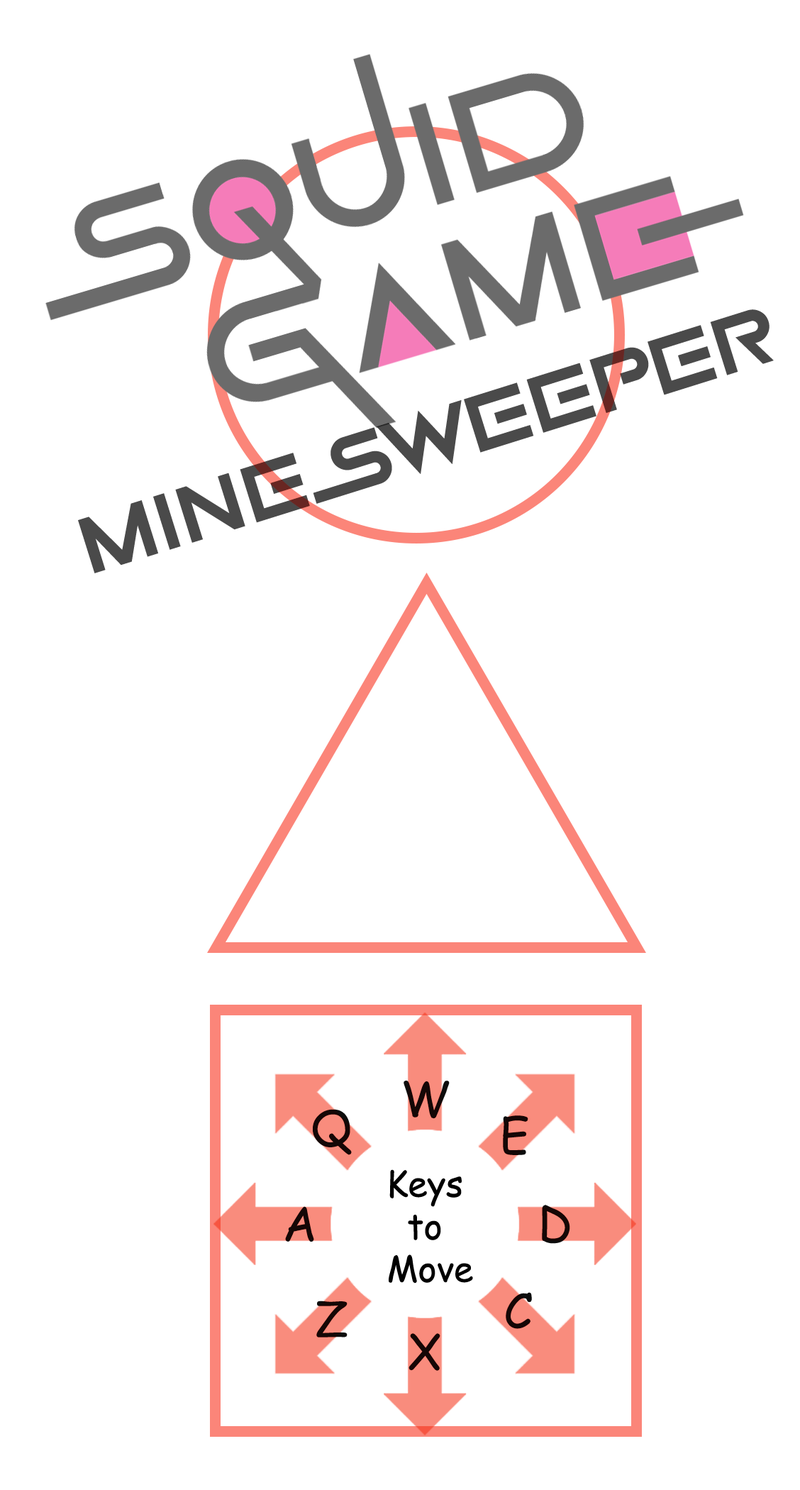
<style>
.page{position:relative;width:800px;height:1490px;background:#ffffff}
.page>*{position:absolute;margin:0}
.t1{font:88.7px "GameOfSquids";color:#4a4a4a}
.t2{font:47.3px "ComicSansMS";color:#000000}
.t3{font:35.5px "ComicSansMS";color:#000000}
</style>
<div class="page">
<p class="t1" style="left:78px;top:309px;width:696px;height:264px;rotate:-17deg">MINESWEEPER</p>
<p class="t2" style="left:404px;top:1081px;width:46px;height:38px;opacity:0.95">W</p>
<p class="t2" style="left:313px;top:1109px;width:39px;height:46px;opacity:0.95">Q</p>
<p class="t2" style="left:503px;top:1115px;width:26px;height:40px;opacity:0.95">E</p>
<p class="t3" style="left:389px;top:1169px;width:84px;height:114px;text-align:center">Keys <br>to <br>Move</p>
<p class="t2" style="left:542px;top:1205px;width:28px;height:39px;opacity:0.95">D</p>
<p class="t2" style="left:285px;top:1206px;width:29px;height:36px;opacity:0.95">A</p>
<p class="t2" style="left:316px;top:1301px;width:32px;height:36px;opacity:0.95">Z</p>
<p class="t2" style="left:506px;top:1292px;width:26px;height:37px;opacity:0.95">C</p>
<p class="t2" style="left:409px;top:1333px;width:32px;height:38px;opacity:0.95">X</p>
</div>
